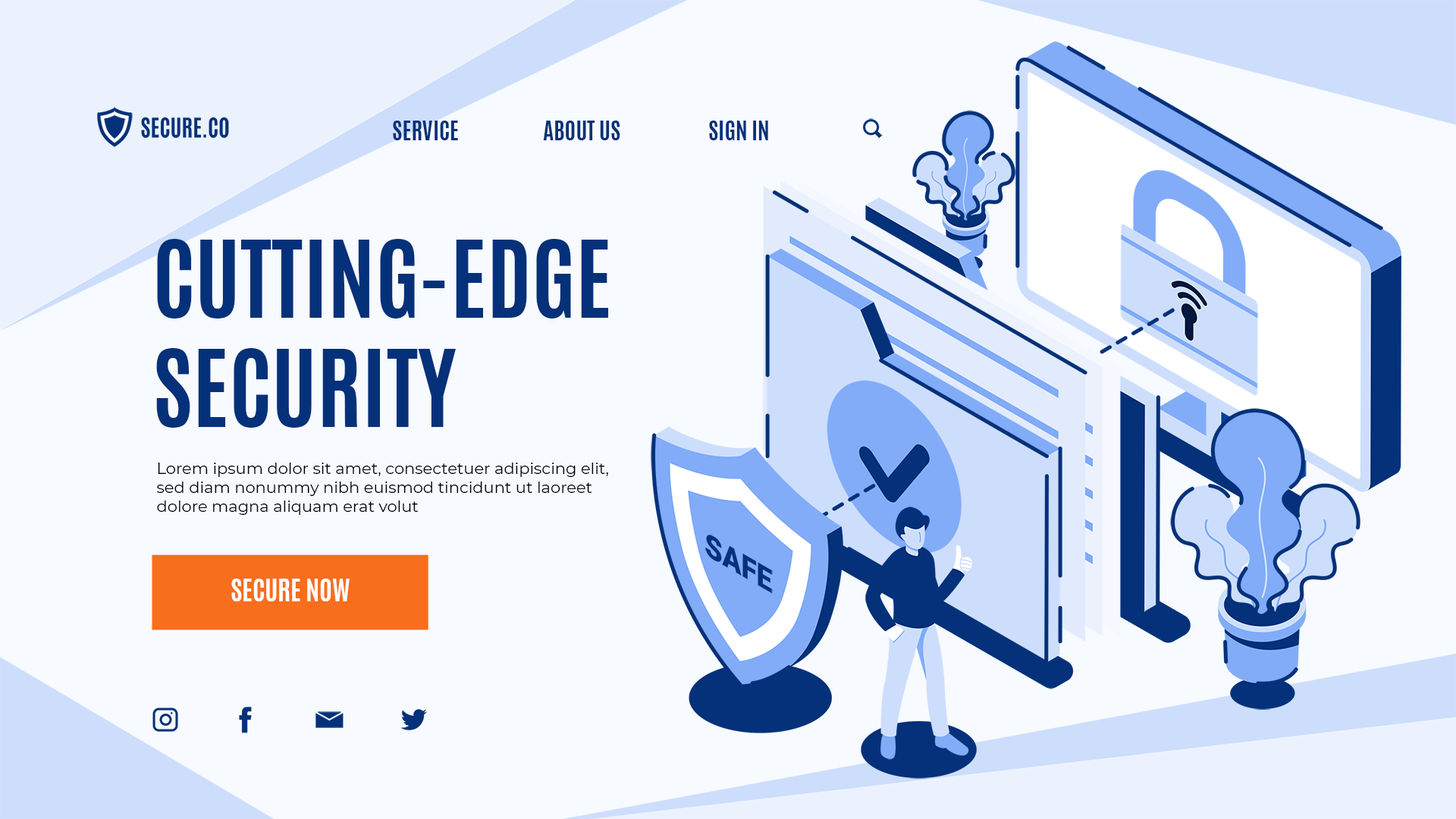
<style>
.page{position:relative;width:1456px;height:819px;background:#f7faff}
.page>*{position:absolute;margin:0}
.t1{font:22.7px "Antonio-Bold";color:#043179}
.t2{font:91px "Antonio-Bold";color:#043179}
.t3{font:15.9px "Montserrat-Regular";color:#000000}
.t4{font:26.2px "Antonio-Bold";color:#ffffff}
</style>
<div class="page">
<p class="t1" style="left:393px;top:121px;width:65px;height:19px">SERVICE</p>
<p class="t1" style="left:543px;top:121px;width:77px;height:19px">ABOUT US</p>
<p class="t1" style="left:709px;top:121px;width:59px;height:19px">SIGN IN</p>
<p class="t2" style="left:156px;top:239px;width:453px;height:189px">CUTTING-EDGE<br>SECURITY</p>
<p class="t3" style="left:157px;top:463px;width:451px;height:52px">Lorem ipsum dolor sit amet, consectetuer adipiscing elit, sed diam nonummy nibh euismod tincidunt ut laoreet dolore magna aliquam erat volut</p>
<p class="t4" style="left:231px;top:579px;width:119px;height:22px">SECURE NOW</p>
</div>
